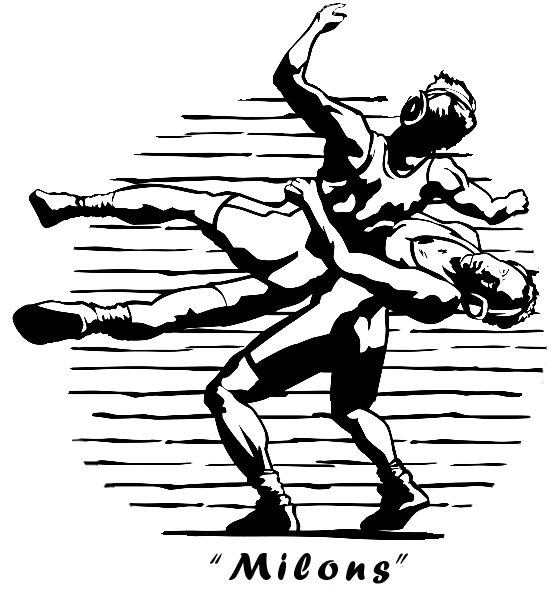
<style>
.page{position:relative;width:558px;height:610px;background:#ffffff}
.page>*{position:absolute;margin:0}
.t1{font:40px "ForteMT";letter-spacing:0.15em;color:#000000}
</style>
<div class="page">
<p class="t1" style="left:210px;top:553px;width:198px;height:31px">“Milons”</p>
</div>
